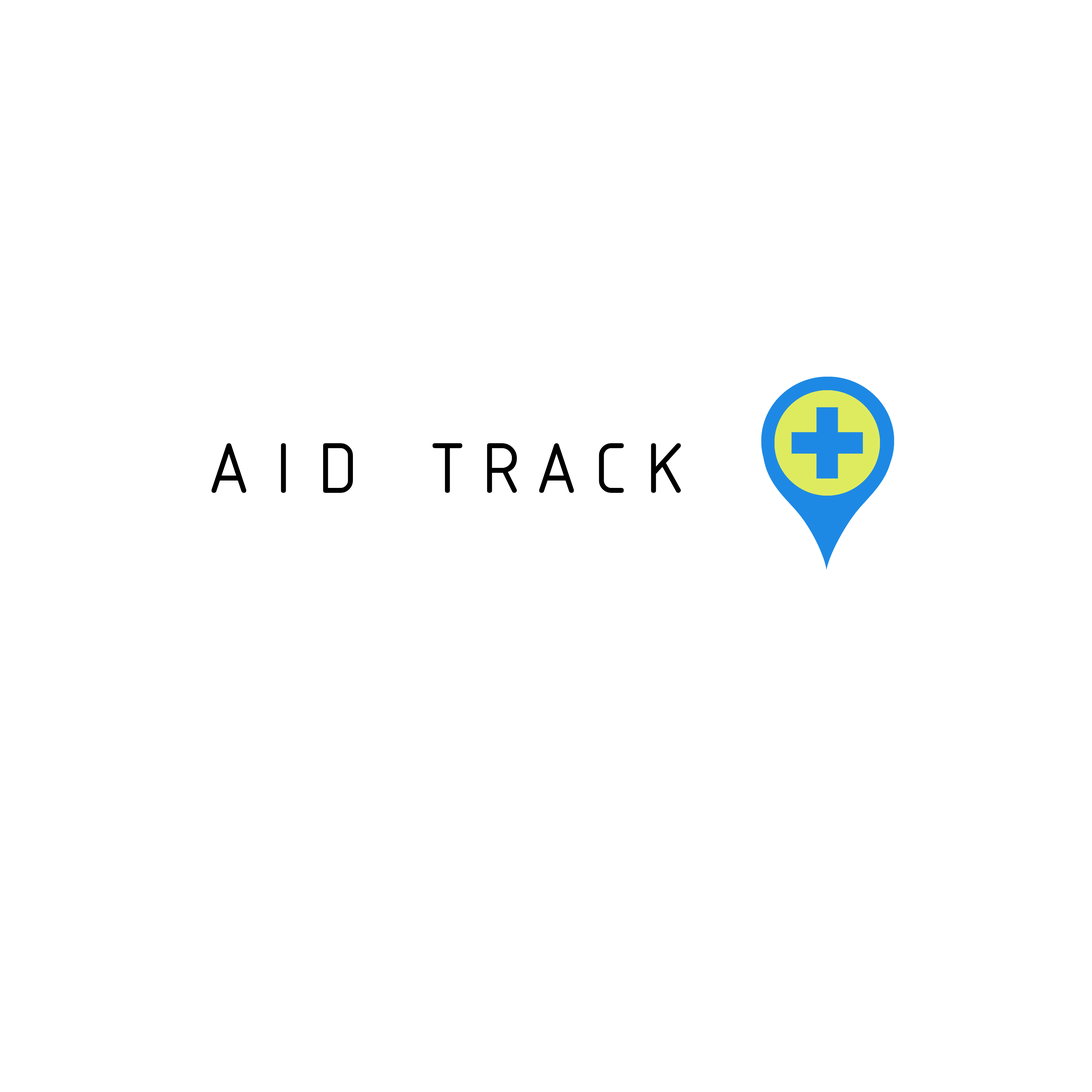
<style>
.page{position:relative;width:1092px;height:1092px;background:#ffffff}
.page>*{position:absolute;margin:0}
.t1{font:77.1px "ISOCTEUR";color:#000000}
</style>
<div class="page">
<p class="t1" style="left:211px;top:443px;width:470px;height:50px">AID TRACK</p>
</div>
